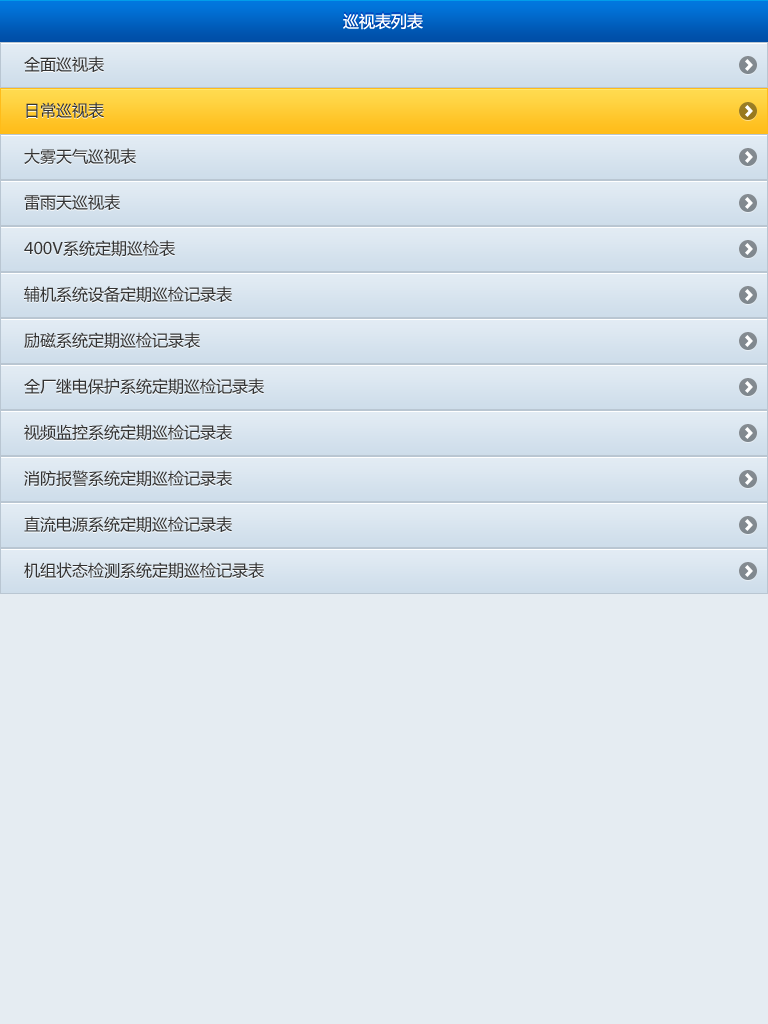
<style>
.page{position:relative;width:768px;height:1024px;background:#e5ecf2}
.page>*{position:absolute;margin:0}
.t1{font:16px "MicrosoftYaHei";color:#ffffff}
.t2{font:16px "MicrosoftYaHei";color:#333333}
</style>
<div class="page">
<p class="t1" style="left:343px;top:13px;width:80px;height:17px">巡视表列表</p>
<p class="t2" style="left:24px;top:56px;width:80px;height:17px">全面巡视表</p>
<p class="t2" style="left:26px;top:102px;width:78px;height:17px">日常巡视表</p>
<p class="t2" style="left:24px;top:148px;width:112px;height:17px">大雾天气巡视表</p>
<p class="t2" style="left:24px;top:194px;width:96px;height:17px">雷雨天巡视表</p>
<p class="t2" style="left:24px;top:240px;width:151px;height:17px">400V系统定期巡检表</p>
<p class="t2" style="left:24px;top:286px;width:208px;height:17px">辅机系统设备定期巡检记录表</p>
<p class="t2" style="left:24px;top:332px;width:176px;height:17px">励磁系统定期巡检记录表</p>
<p class="t2" style="left:24px;top:378px;width:240px;height:17px">全厂继电保护系统定期巡检记录表</p>
<p class="t2" style="left:24px;top:424px;width:208px;height:17px">视频监控系统定期巡检记录表</p>
<p class="t2" style="left:24px;top:470px;width:208px;height:17px">消防报警系统定期巡检记录表</p>
<p class="t2" style="left:24px;top:516px;width:208px;height:17px">直流电源系统定期巡检记录表</p>
<p class="t2" style="left:24px;top:562px;width:240px;height:17px">机组状态检测系统定期巡检记录表</p>
</div>
